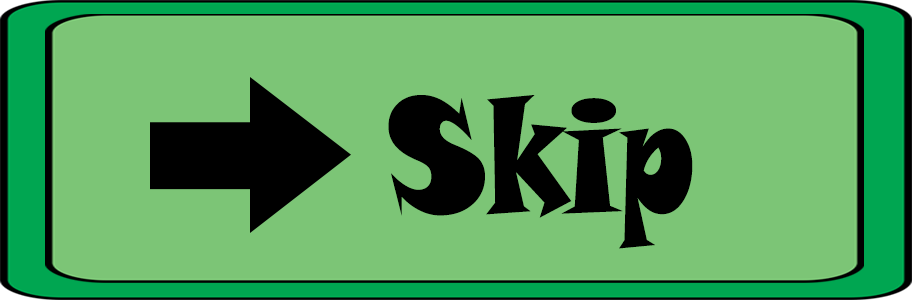
<style>
.page{position:relative;width:912px;height:300px;background:#7cc576}
.page>*{position:absolute;margin:0}
.t1{font:160px "SnapITC-Regular";color:#000000;scale:0.75 1}
</style>
<div class="page">
<p class="t1" style="left:388px;top:95px;width:305px;height:154px">Skip</p>
</div>
